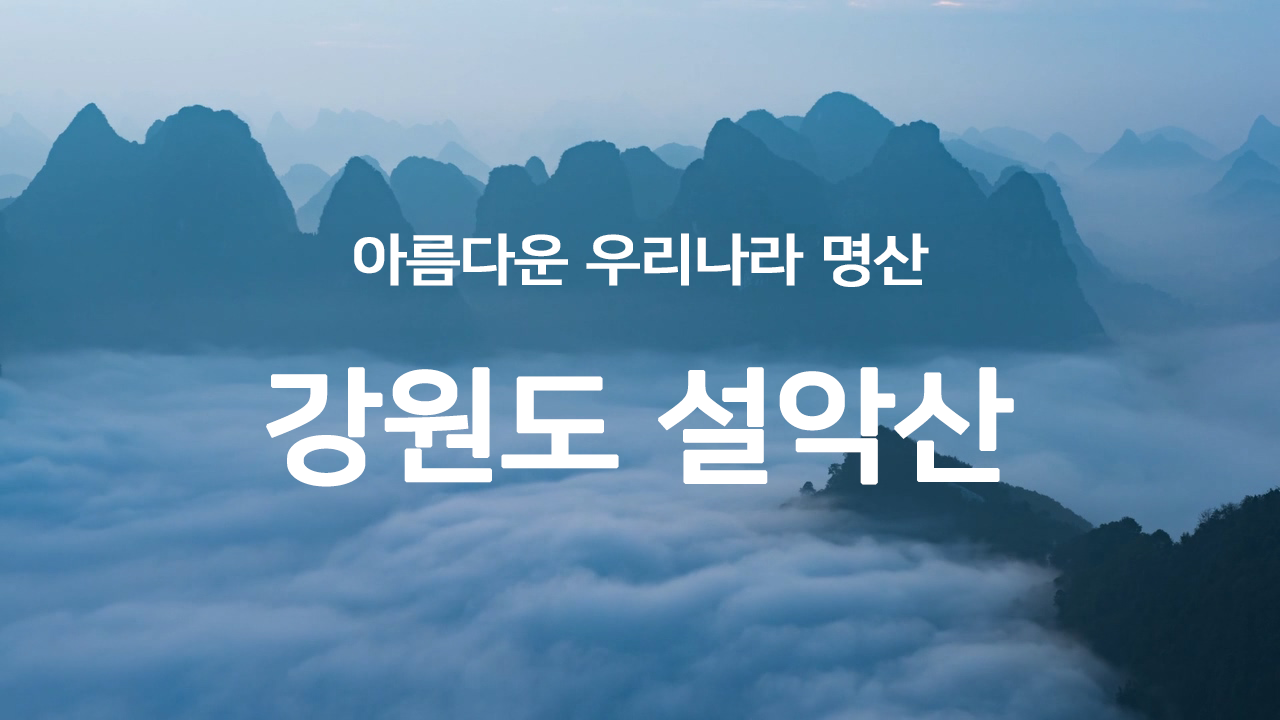
<style>
.page{position:relative;width:1280px;height:720px}
.page>*{position:absolute;margin:0}
.t1{font:55.6px "NanumSquare_acB";color:#ffffff;font-weight:bold;scale:1.1 1}
.t2{font:121.9px "NanumSquare_acB";color:#ffffff;font-weight:bold;scale:1.1 1}
</style>
<div class="page">
<p class="t1" style="left:354px;top:233px;width:575px;height:54px">아름다운 우리나라 명산</p>
<p class="t2" style="left:266px;top:367px;width:748px;height:120px">강원도 설악산</p>
</div>
